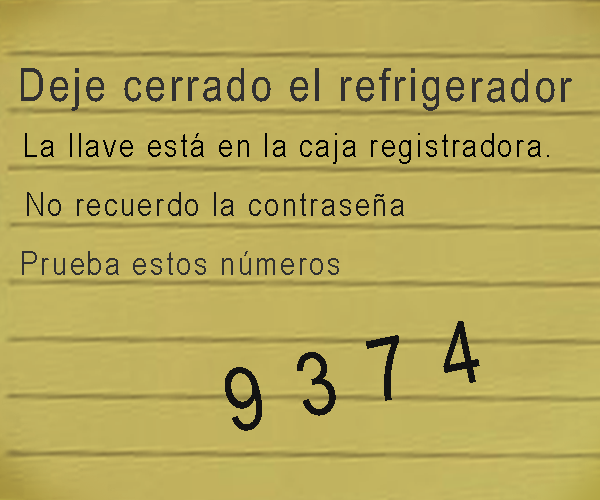
<style>
.page{position:relative;width:600px;height:500px}
.page>*{position:absolute;margin:0}
.t1{font:45.9px "ArialNarrow";letter-spacing:0.075em;color:#313030}
.t2{font:33.2px "ArialNarrow";letter-spacing:0.075em;color:#000000}
.t3{font:33.2px "ArialNarrow";letter-spacing:0.075em;color:#171717}
.t4{font:33.2px "ArialNarrow";letter-spacing:0.075em;color:#303030}
.t5{font:88.3px "ArialNarrow";letter-spacing:0.075em;color:#121212}
</style>
<div class="page">
<p class="t1" style="left:21px;top:68px;width:551px;height:43px">Deje cerrado el refrigerador</p>
<p class="t2" style="left:25px;top:133px;width:524px;height:31px">La llave está en la caja registradora.</p>
<p class="t3" style="left:27px;top:192px;width:377px;height:24px">No recuerdo la contraseña</p>
<p class="t4" style="left:22px;top:251px;width:317px;height:24px">Prueba estos números</p>
<p class="t5" style="left:225px;top:321px;width:255px;height:110px;rotate:-12deg">9 3 7 4</p>
</div>
